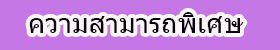
<style>
.page{position:relative;width:280px;height:50px;background:#c577e5}
.page>*{position:absolute;margin:0}
.t1{font:27.8px "Tahoma";color:#09020c}
</style>
<div class="page">
<p class="t1" style="left:29px;top:12px;width:215px;height:21px">ความสามารถพิเศษ</p>
</div>
